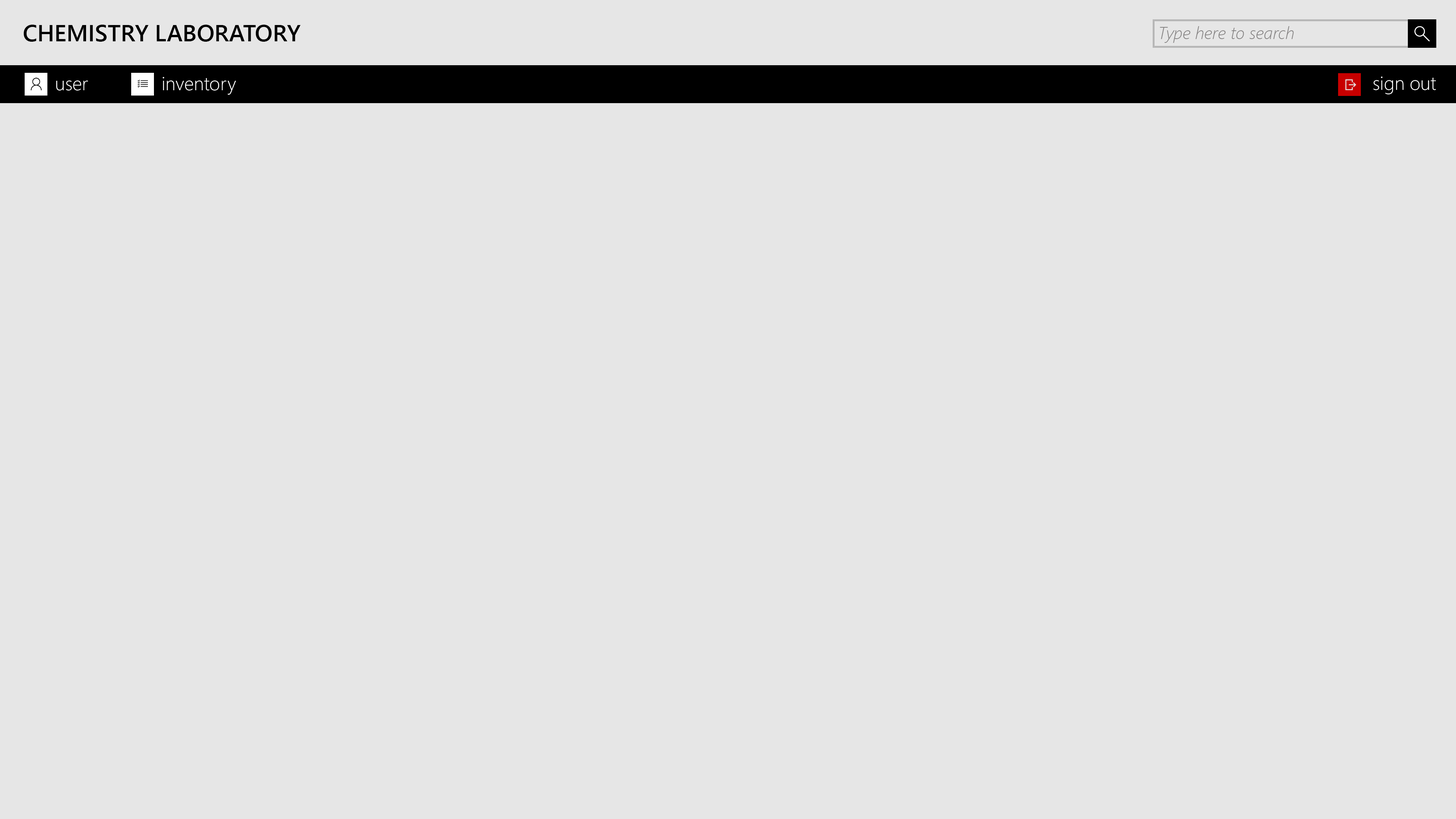
<style>
.page{position:relative;width:1456px;height:819px;background:#e6e6e6}
.page>*{position:absolute;margin:0}
.t1{font:23.4px "SegoeUI-Semibold";color:#000000}
.t2{font:17.1px "SegoeUI-LightItalic";color:#848282}
.t3{font:19px "SegoeUI-Light";color:#ffffff}
</style>
<div class="page">
<p class="t1" style="left:24px;top:25px;width:277px;height:17px">CHEMISTRY LABORATORY</p>
<p class="t2" style="left:1160px;top:26px;width:134px;height:17px">Type here to search</p>
<p class="t3" style="left:163px;top:77px;width:73px;height:18px">inventory</p>
<p class="t3" style="left:1373px;top:77px;width:63px;height:17px">sign out</p>
<p class="t3" style="left:56px;top:80px;width:32px;height:11px">user</p>
</div>
